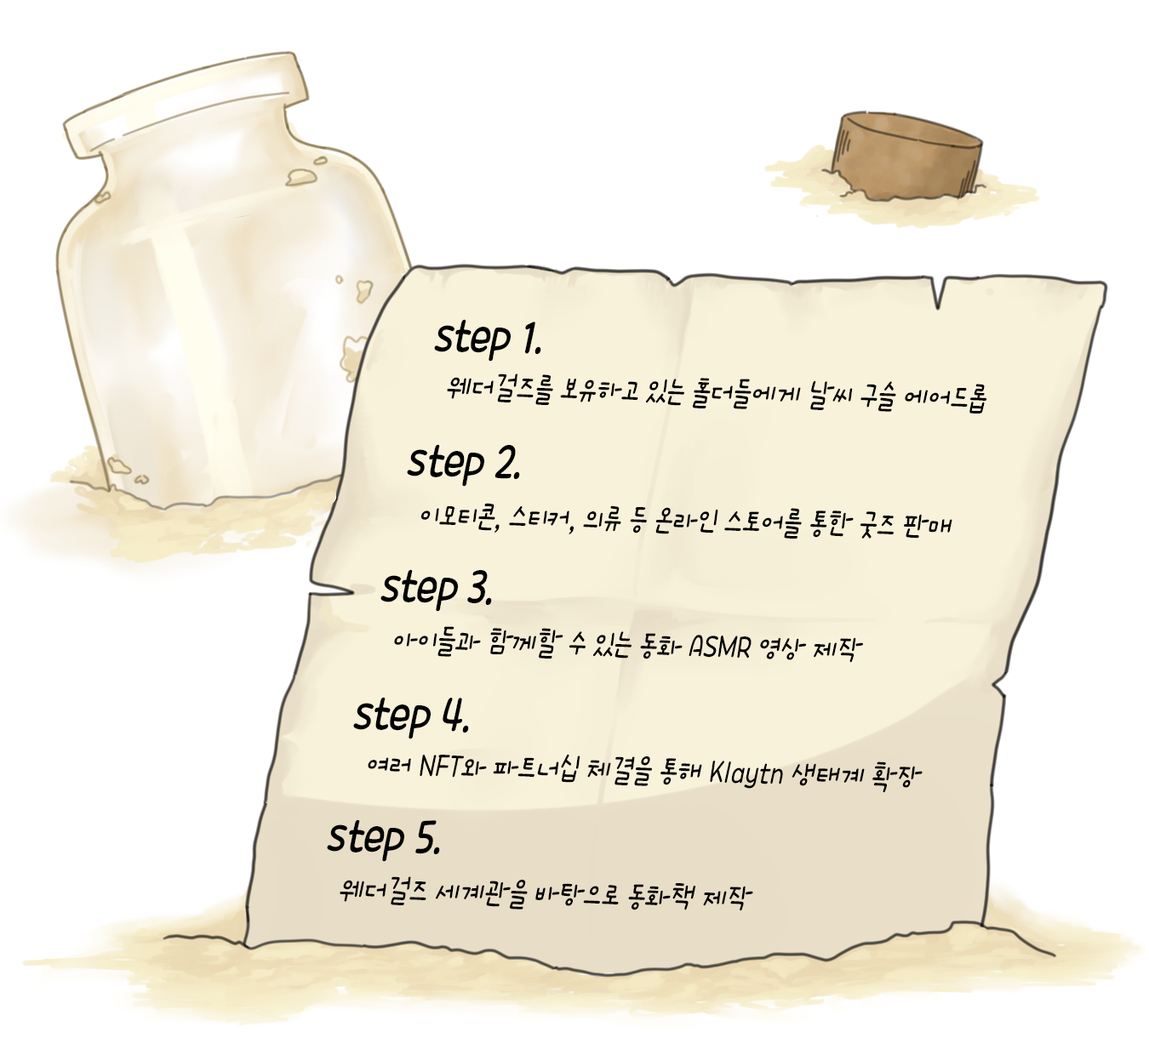
<style>
.page{position:relative;width:1149px;height:1038px;background:#ffffff}
.page>*{position:absolute;margin:0}
.t1{font:31.9px/67.4px "TTGamseongjujeomR";color:#000000;scale:0.81 1}
.t2{font:46.1px/60.3px "TTDahongR";color:#000000;scale:0.81 1}
.t3{font:46.1px/60.3px "TTGamseongjujeomB";color:#000000;scale:0.81 1}
.t4{font:49.6px/60.3px "TTBomuljidoR";color:#000000;scale:0.81 1}
.t5{font:46.1px/63.8px "TTDahongR";color:#000000;scale:0.81 1}
</style>
<div class="page">
<p class="t1" style="left:327px;top:319px;width:660px;height:592px;rotate:1deg"><span class="t2">step </span><span class="t3">1</span><span class="t2">.</span><span class="t4"> <br>   </span>웨더걸즈를 보유하고 있는 홀더들에게 날씨 구슬 에어드롭<br><span class="t5">step 2. <br>   </span>이모티콘, 스티커, 의류 등 온라인 스토어를 통한 굿즈 판매<br><span class="t2">step 3. <br>   </span>아이들과 함께할 수 있는 동화 ASMR 영상 제작<br><span class="t2">step 4. <br>   </span>여러 NFT와 파트너십 체결을 통해 Klaytn 생태계 확장<br><span class="t2">step 5.<br>   </span>웨더걸즈 세계관을 바탕으로 동화책 제작</p>
</div>
